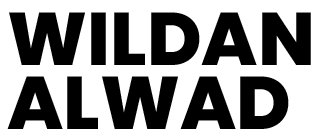
<style>
.page{position:relative;width:321px;height:140px;background:#ffffff}
.page>*{position:absolute;margin:0}
.t1{font:74.5px "Poppins-ExtraBold";color:#000000}
</style>
<div class="page">
<p class="t1" style="left:9px;top:12px;width:302px;height:53px">WILDAN</p>
<p class="t1" style="left:7px;top:76px;width:282px;height:53px">ALWAD</p>
</div>
